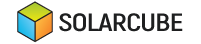
<style>
.page{position:relative;width:201px;height:44px;background:#ffffff}
.page>*{position:absolute;margin:0}
.t1{font:25px "Akrobat-Bold";letter-spacing:-0.025em;color:#1e1f20;scale:1.2 1}
</style>
<div class="page">
<p class="t1" style="left:59px;top:13px;width:124px;height:19px">SOLARCUBE</p>
</div>
